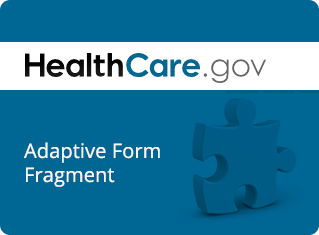
<style>
.page{position:relative;width:319px;height:235px;background:#006694}
.page>*{position:absolute;margin:0}
.t1{font:20px "OpenSans";letter-spacing:0.005em;color:#f7f7f7}
</style>
<div class="page">
<p class="t1" style="left:24px;top:142px;width:136px;height:45px">Adaptive Form<br>Fragment</p>
</div>
